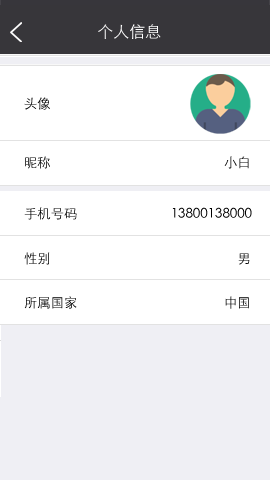
<style>
.page{position:relative;width:270px;height:480px;background:#ffffff}
.page>*{position:absolute;margin:0}
.t1{font:16px "STXihei";color:#ffffff}
.t2{font:13.3px "STXihei"}
.t3{font:13.3px "STXihei";color:#000000}
</style>
<div class="page">
<p class="t1" style="left:98px;top:24px;width:63px;height:15px">个人信息</p>
<p class="t2" style="left:24px;top:97px;width:26px;height:13px">头像</p>
<p class="t2" style="left:25px;top:156px;width:224px;height:13px">昵称                                                    小白</p>
<p class="t3" style="left:24px;top:207px;width:228px;height:13px">手机号码                            13800138000</p>
<p class="t3" style="left:24px;top:252px;width:226px;height:13px">性别                                                        男</p>
<p class="t2" style="left:24px;top:296px;width:225px;height:13px">所属国家                                            中国</p>
</div>
